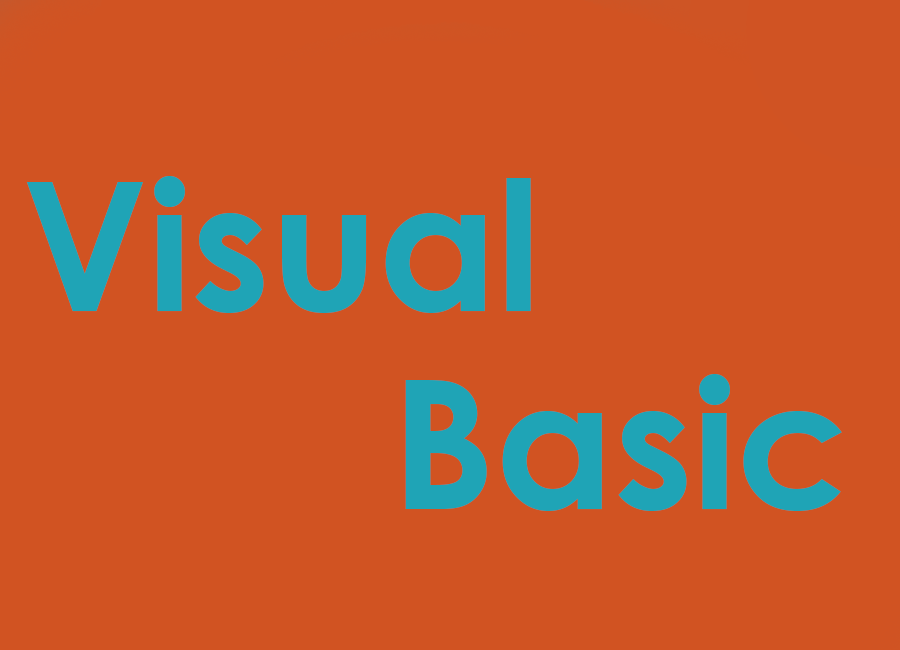
<style>
.page{position:relative;width:900px;height:650px;background:#d15322}
.page>*{position:absolute;margin:0}
.t1{font:180px "CenturyGothic-Bold";color:#1fa4b6}
</style>
<div class="page">
<p class="t1" style="left:26px;top:176px;width:505px;height:137px">Visual</p>
<p class="t1" style="left:405px;top:374px;width:437px;height:137px">Basic</p>
</div>
